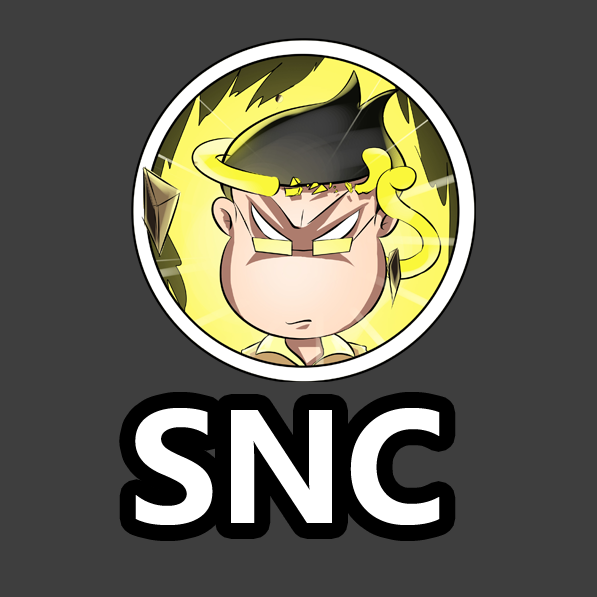
<style>
.page{position:relative;width:597px;height:597px;background:#3e3e3e}
.page>*{position:absolute;margin:0}
.t1{font:149.8px "MicrosoftYaHei-Bold";color:#ffffff}
</style>
<div class="page">
<p class="t1" style="left:135px;top:408px;width:305px;height:117px">SNC</p>
</div>
